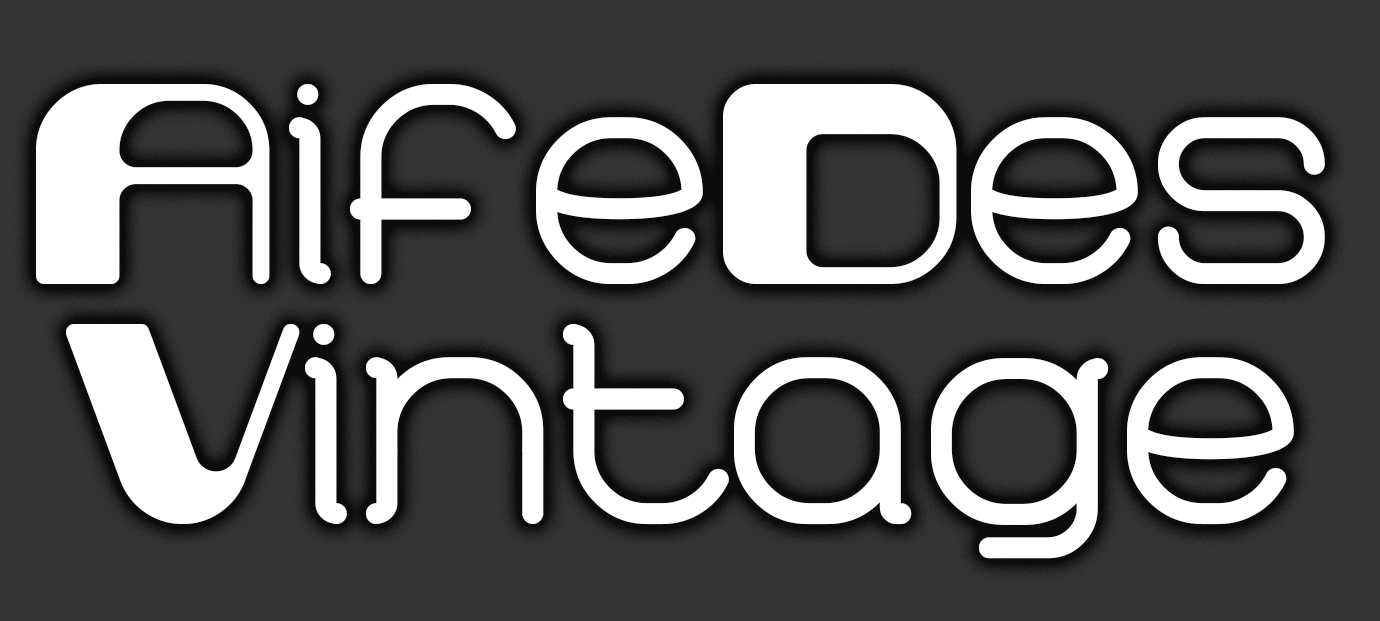
<style>
.page{position:relative;width:1380px;height:621px;background:#333333}
.page>*{position:absolute;margin:0}
.t1{font:200px "Retro60Prime";color:#ffffff}
</style>
<div class="page">
<p class="t1" style="left:36px;top:84px;width:1289px;height:475px;text-align:center">AifeDes<br>Vintage</p>
</div>
